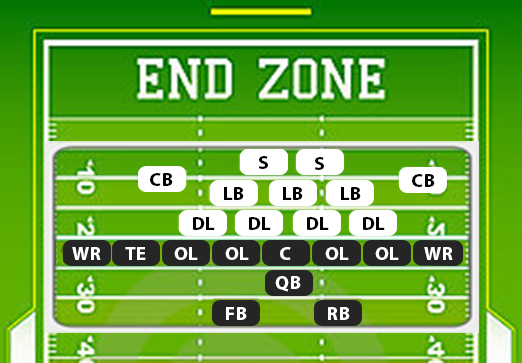
<style>
.page{position:relative;width:522px;height:363px}
.page>*{position:absolute;margin:0}
.t1{font:19.4px "MyriadHebrew-Bold";color:#000000}
.t2{font:19.4px "MyriadHebrew-Bold";color:#ffffff}
</style>
<div class="page">
<p class="t1" style="left:258px;top:156px;width:10px;height:13px">S</p>
<p class="t1" style="left:314px;top:157px;width:10px;height:13px">S</p>
<p class="t1" style="left:150px;top:173px;width:23px;height:13px">CB</p>
<p class="t1" style="left:412px;top:174px;width:23px;height:13px">CB</p>
<p class="t1" style="left:224px;top:187px;width:20px;height:13px">LB</p>
<p class="t1" style="left:283px;top:187px;width:20px;height:13px">LB</p>
<p class="t1" style="left:341px;top:187px;width:20px;height:13px">LB</p>
<p class="t1" style="left:193px;top:217px;width:22px;height:13px">DL</p>
<p class="t1" style="left:249px;top:217px;width:22px;height:13px">DL</p>
<p class="t1" style="left:307px;top:217px;width:22px;height:13px">DL</p>
<p class="t1" style="left:363px;top:217px;width:22px;height:13px">DL</p>
<p class="t2" style="left:72px;top:247px;width:29px;height:13px">WR</p>
<p class="t2" style="left:125px;top:247px;width:21px;height:13px">TE</p>
<p class="t2" style="left:174px;top:247px;width:24px;height:13px">OL</p>
<p class="t2" style="left:225px;top:247px;width:24px;height:13px">OL</p>
<p class="t2" style="left:280px;top:247px;width:11px;height:13px">C</p>
<p class="t2" style="left:325px;top:247px;width:24px;height:13px">OL</p>
<p class="t2" style="left:375px;top:247px;width:24px;height:13px">OL</p>
<p class="t2" style="left:424px;top:247px;width:29px;height:13px">WR</p>
<p class="t2" style="left:275px;top:276px;width:26px;height:16px">QB</p>
<p class="t2" style="left:226px;top:307px;width:21px;height:13px">FB</p>
<p class="t2" style="left:328px;top:307px;width:22px;height:13px">RB</p>
</div>
